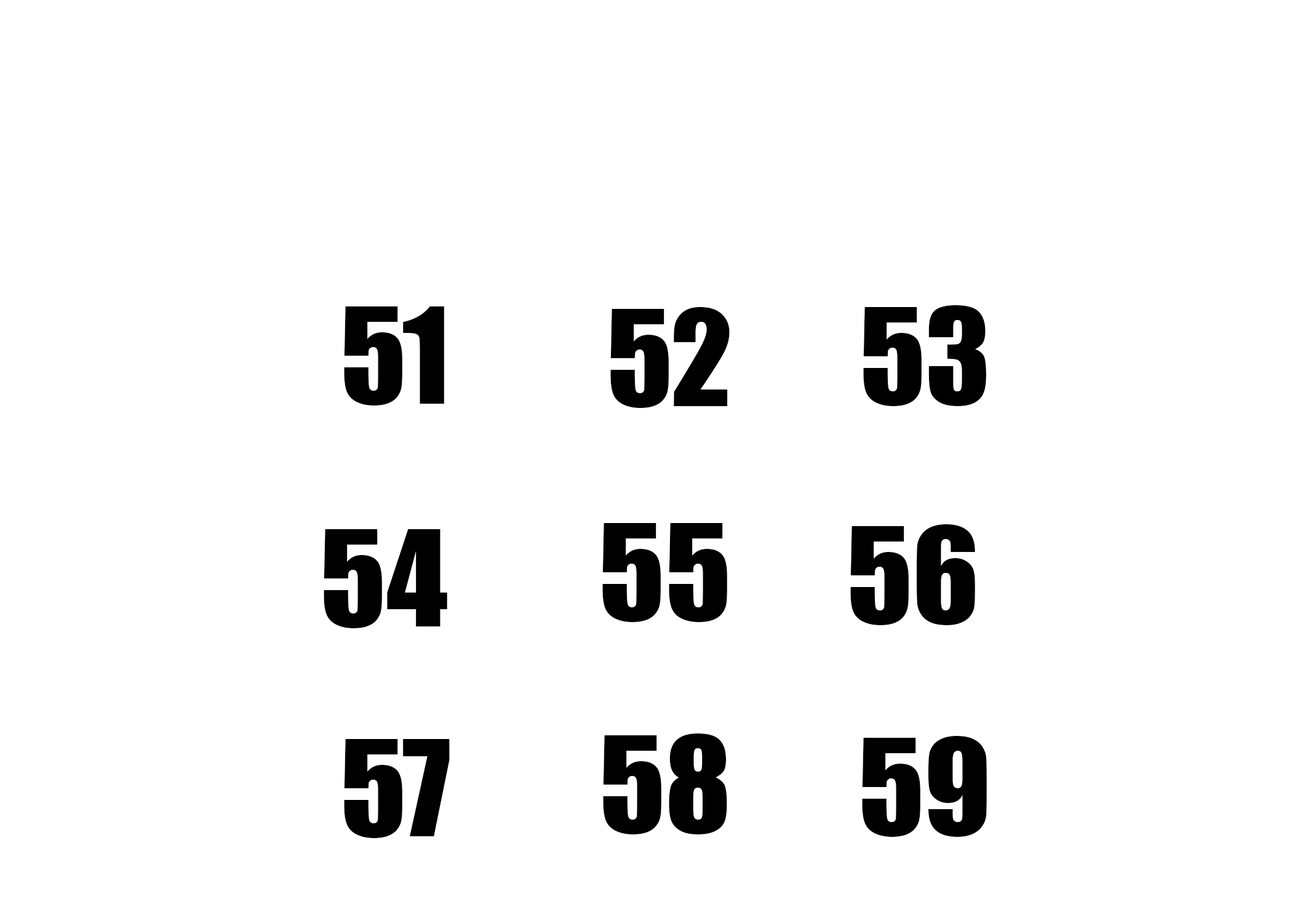
<style>
.page{position:relative;width:1292px;height:923px;background:#ffffff}
.page>*{position:absolute;margin:0}
.t1{font:123.1px "Impact";color:#000000}
.t2{font:123.1px "Impact";color:#010101}
</style>
<div class="page">
<p class="t1" style="left:863px;top:305px;width:123px;height:101px">53</p>
<p class="t2" style="left:344px;top:306px;width:100px;height:99px">51</p>
<p class="t1" style="left:610px;top:307px;width:120px;height:101px">52</p>
<p class="t1" style="left:324px;top:529px;width:123px;height:99px">54</p>
<p class="t1" style="left:602px;top:523px;width:125px;height:99px">55</p>
<p class="t1" style="left:850px;top:524px;width:125px;height:101px">56</p>
<p class="t1" style="left:603px;top:733px;width:124px;height:101px">58</p>
<p class="t1" style="left:862px;top:736px;width:125px;height:101px">59</p>
<p class="t1" style="left:344px;top:739px;width:106px;height:99px">57</p>
</div>
